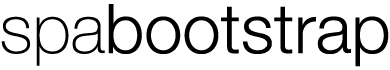
<style>
.page{position:relative;width:390px;height:70px;background:#ffffff}
.page>*{position:absolute;margin:0}
.t1{font:68.6px "HelveticaNeue-Light";color:#000000}
.t2{font:68.6px "HelveticaNeue-Thin";color:#000000}
</style>
<div class="page">
<p class="t1" style="left:1px;top:4px;width:388px;height:63px"><span class="t2">spa</span>bootstrap</p>
</div>
